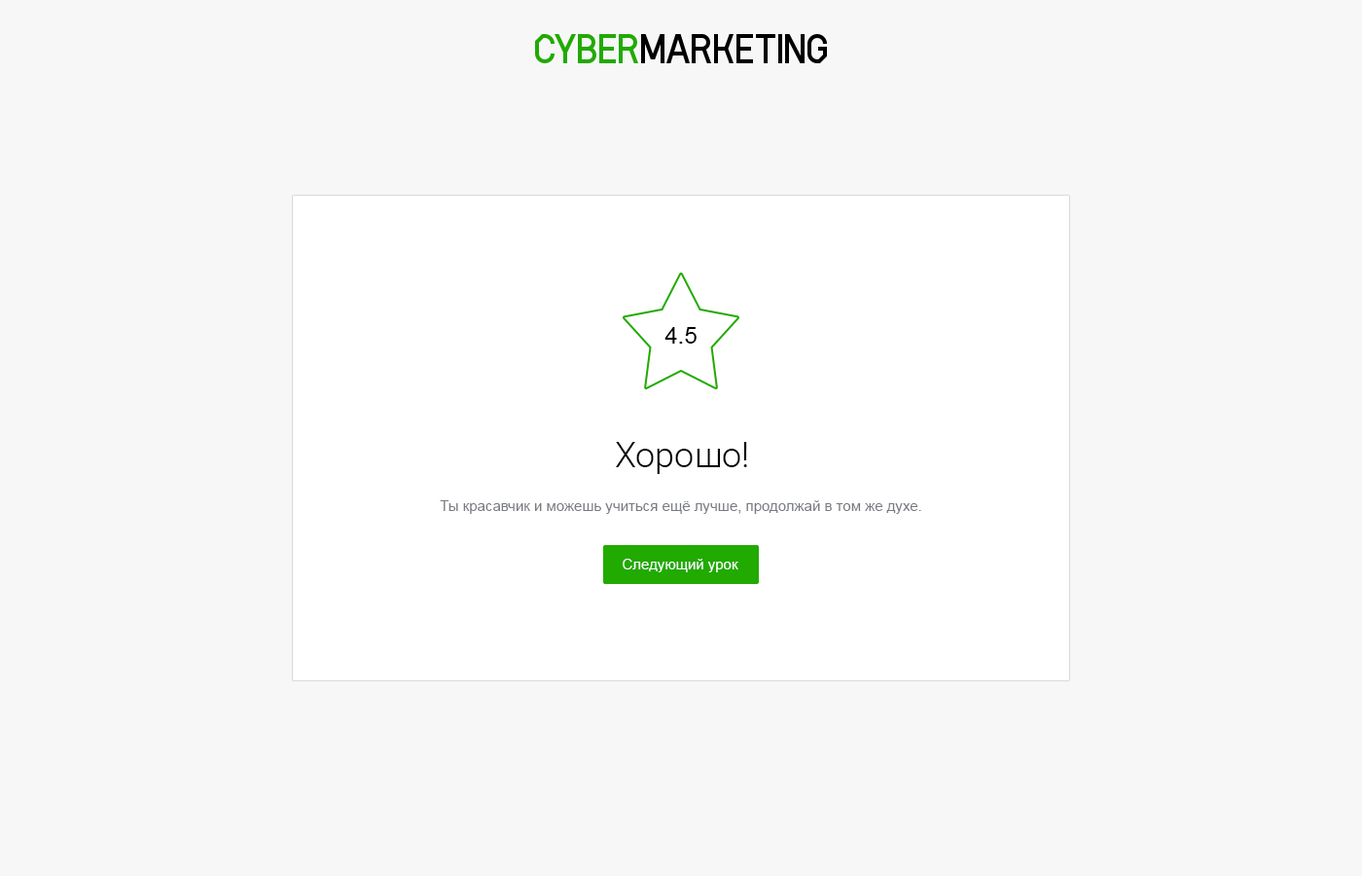
<style>
.page{position:relative;width:1362px;height:876px;background:#f7f7f8}
.page>*{position:absolute;margin:0}
.t1{font:23.3px "ArialMT";color:#000000}
.t2{font:35px "Roboto-Light";color:#000000}
.t3{font:14.6px "ArialMT";color:#787b81}
.t4{font:14.6px "ArialMT";color:#ffffff}
</style>
<div class="page">
<p class="t1" style="left:664px;top:327px;width:33px;height:16px">4.5</p>
<p class="t2" style="left:616px;top:442px;width:131px;height:32px">Хорошо!</p>
<p class="t3" style="left:440px;top:500px;width:481px;height:14px">Ты красавчик и можешь учиться ещё лучше, продолжай в том же духе.</p>
<p class="t4" style="left:623px;top:558px;width:115px;height:14px">Следующий урок</p>
</div>
